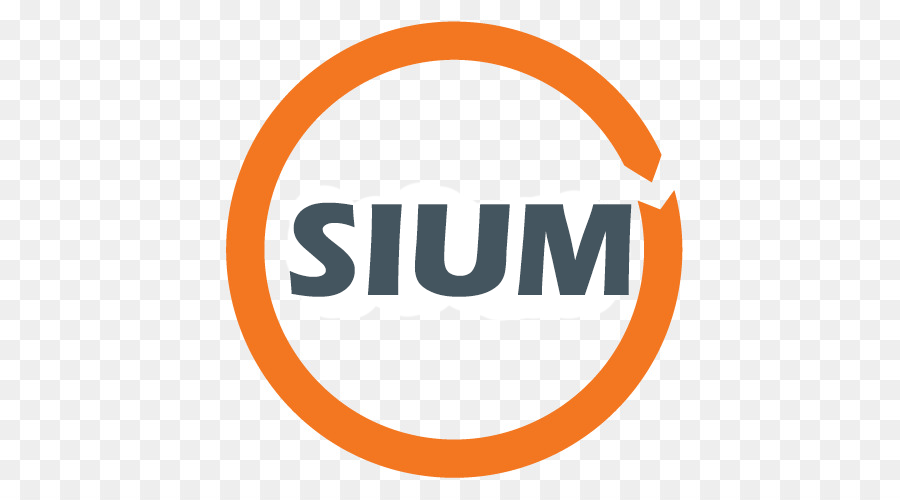
<style>
.page{position:relative;width:900px;height:500px;background:#ffffff}
.page>*{position:absolute;margin:0}
.t1{font:136px "ErasITC-Bold";color:#44555f}
</style>
<div class="page">
<p class="t1" style="left:289px;top:202px;width:343px;height:95px">SIUM</p>
</div>
